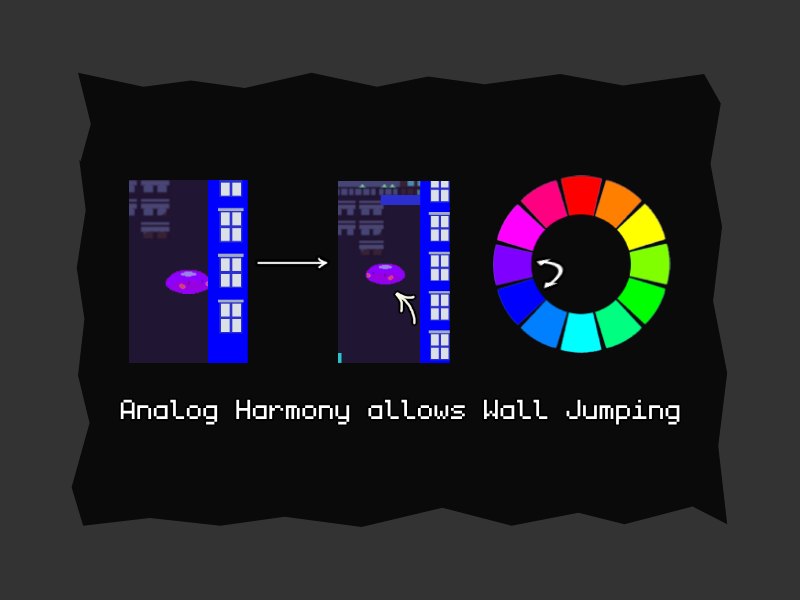
<style>
.page{position:relative;width:800px;height:600px;background:#0a0a0a}
.page>*{position:absolute;margin:0}
.t1{font:44px "monogram";color:#ffffff}
</style>
<div class="page">
<p class="t1" style="left:120px;top:399px;width:560px;height:26px">Analog Harmony allows Wall Jumping</p>
</div>
